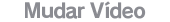
<style>
.page{position:relative;width:170px;height:22px;background:#ffffff}
.page>*{position:absolute;margin:0}
.t1{font:20px "RodinPro-B";letter-spacing:-0.039em;color:#8b8c92}
</style>
<div class="page">
<p class="t1" style="left:25px;top:1px;width:121px;height:18px">Mudar Vídeo</p>
</div>
